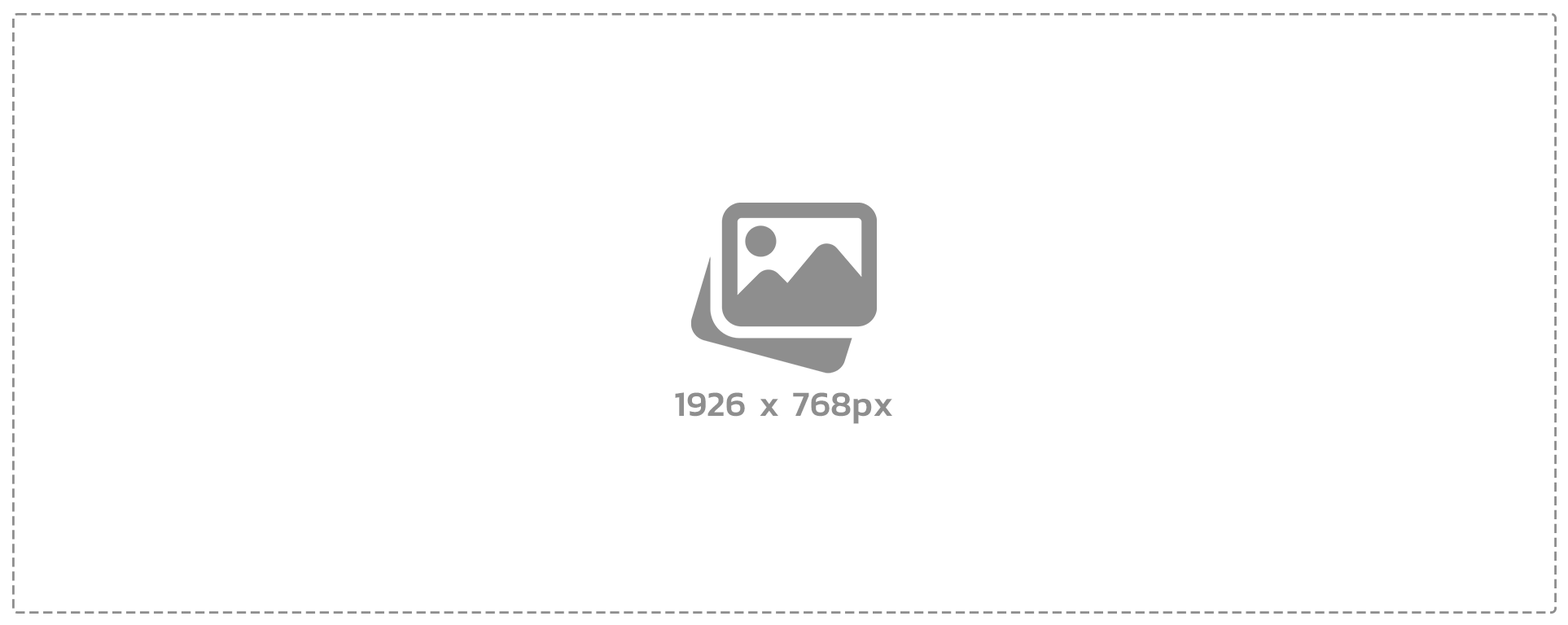
<style>
.page{position:relative;width:1568px;height:625px;background:#ffffff}
.page>*{position:absolute;margin:0}
.t1{font:35.6px "Kanit-Medium";color:#8e8e8e}
</style>
<div class="page">
<p class="t1" style="left:675px;top:392px;width:217px;height:32px">1926 x 768px</p>
</div>
